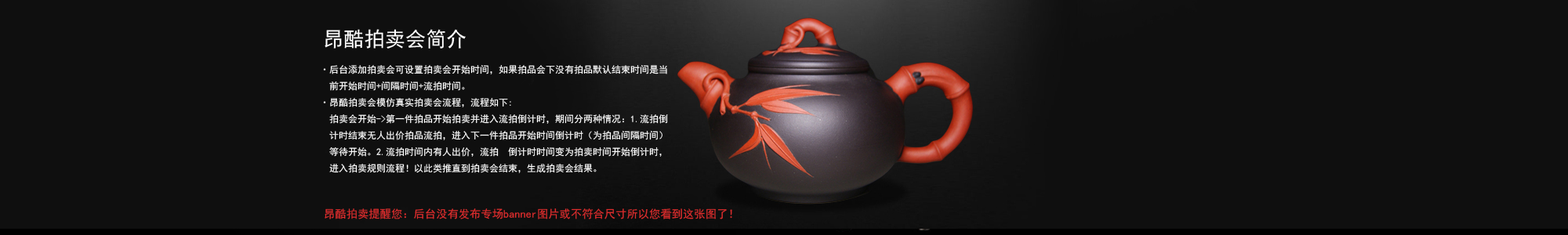
<style>
.page{position:relative;width:1568px;height:235px;background:#0f0f0f}
.page>*{position:absolute;margin:0}
.t1{font:20.5px "SimHei";color:#ffffff}
.t2{font:9.4px "SimHei";color:#ffffff}
.t3{font:11.2px "SimHei";color:#dd2c2c}
</style>
<div class="page">
<p class="t1" style="left:325px;top:29px;width:141px;height:20px">昂酷拍卖会简介</p>
<p class="t2" style="left:323px;top:65px;width:345px;height:108px">·后台添加拍卖会可设置拍卖会开始时间，如果拍品会下没有拍品默认结束时间是当<br>  前开始时间+间隔时间+流拍时间。<br>·昂酷拍卖会模仿真实拍卖会流程，流程如下:<br>  拍卖会开始-&gt;第一件拍品开始拍卖并进入流拍倒计时，期间分两种情况：1.流拍倒<br>  计时结束无人出价拍品流拍，进入下一件拍品开始时间倒计时（为拍品间隔时间）<br>  等待开始。2.流拍时间内有人出价，流拍  倒计时时间变为拍卖时间开始倒计时，<br>  进入拍卖规则流程！以此类推直到拍卖会结束，生成拍卖会结果。</p>
<p class="t3" style="left:325px;top:209px;width:407px;height:11px">昂酷拍卖提醒您：后台没有发布专场banner图片或不符合尺寸所以您看到这张图了！</p>
</div>
